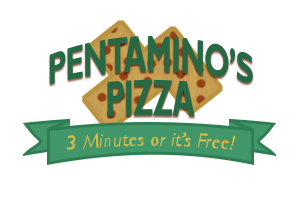
<style>
.page{position:relative;width:300px;height:200px;background:#ffffff}
.page>*{position:absolute;margin:0}
.t1{font:42px "GillSansMT-Bold";letter-spacing:-0.02em;color:#266a45;scale:0.69 1}
.t2{font:20px "GillSans-Italic";color:#d8bb49}
</style>
<div class="page">
<p class="t1" style="left:49px;top:35px;width:204px;height:82px;text-align:center">PENTAMINO’S<br>PIZZA</p>
<p class="t2" style="left:66px;top:132px;width:170px;height:18px">3 Minutes or it’s Free!</p>
</div>
